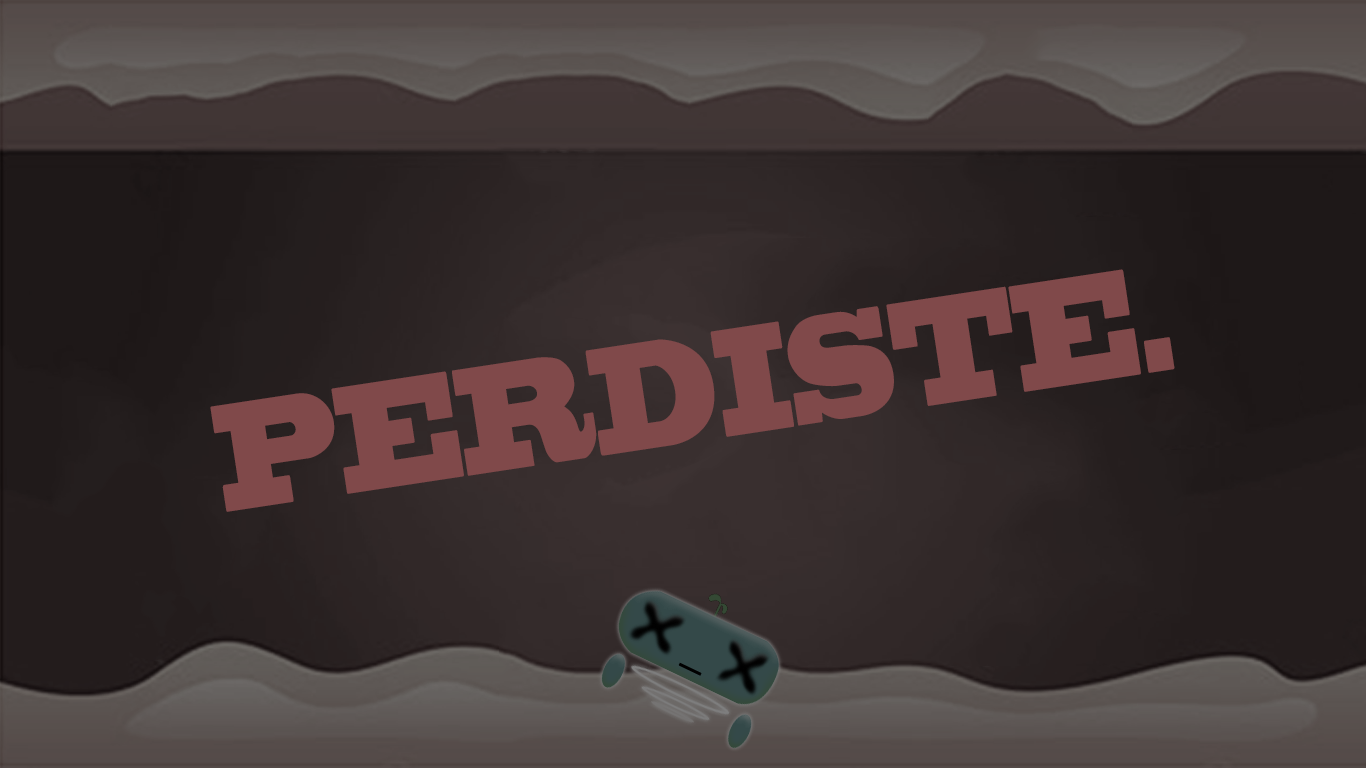
<style>
.page{position:relative;width:1366px;height:768px}
.page>*{position:absolute;margin:0}
.t1{font:141.6px "BlackoakStd";color:#80494a;scale:0.48 1}
</style>
<div class="page">
<p class="t1" style="left:210px;top:269px;width:965px;height:243px;rotate:-9deg">PERDISTE.</p>
</div>
